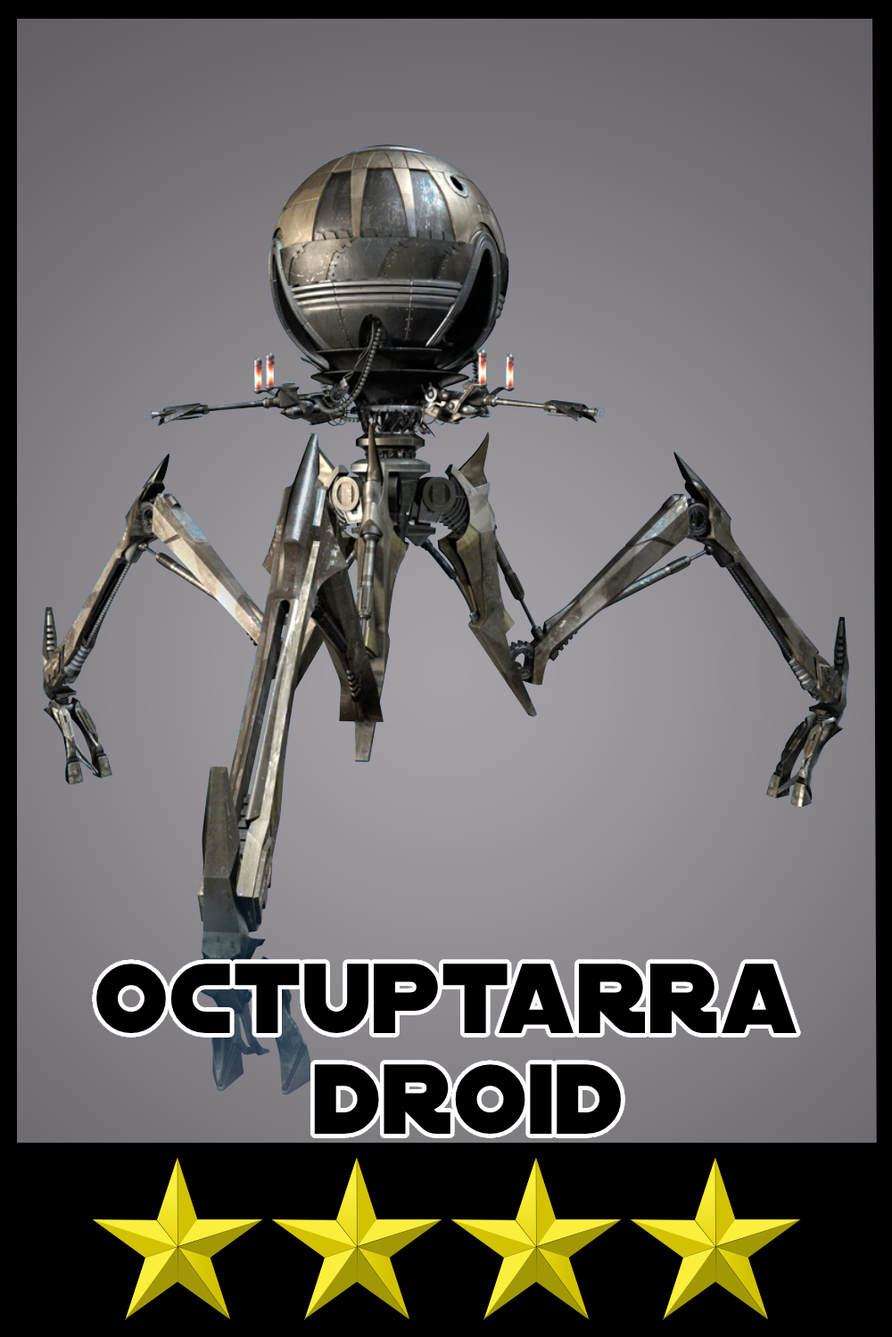
<style>
.page{position:relative;width:892px;height:1337px}
.page>*{position:absolute;margin:0}
.t1{font:106.6px/100.7px "DistantGalaxy";color:#000000}
</style>
<div class="page">
<p class="t1" style="left:96px;top:964px;width:700px;height:170px;text-align:center">octuptarra<br> droid</p>
</div>
